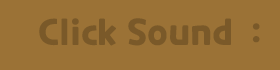
<style>
.page{position:relative;width:280px;height:70px;background:#9b7236}
.page>*{position:absolute;margin:0}
.t1{font:36px "CookieRun-Bold";color:#7a5929}
</style>
<div class="page">
<p class="t1" style="left:39px;top:18px;width:192px;height:28px">Click Sound</p>
<p class="t1" style="left:252px;top:23px;width:8px;height:20px">:</p>
</div>
